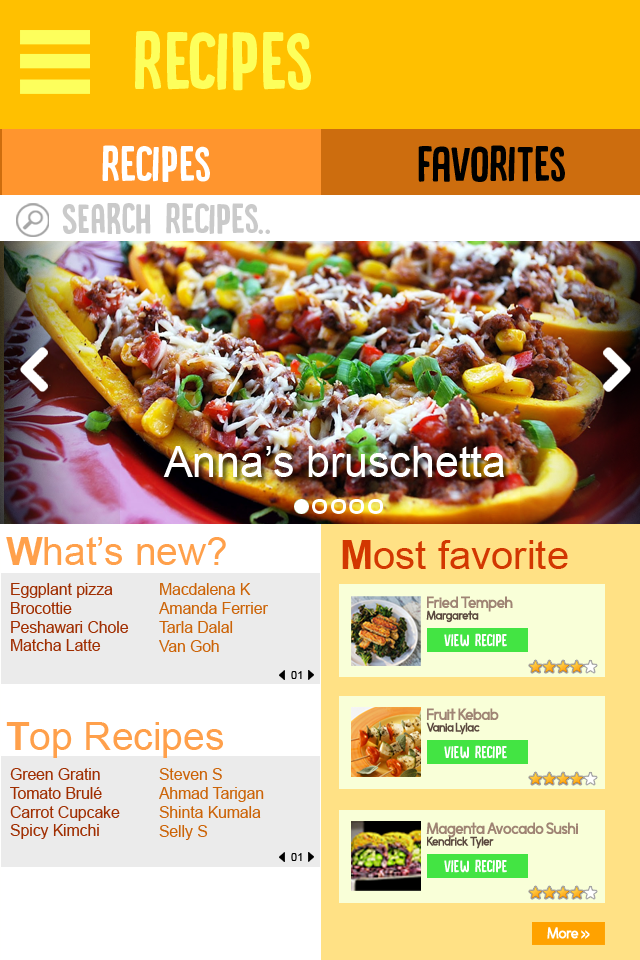
<style>
.page{position:relative;width:640px;height:960px}
.page>*{position:absolute;margin:0}
.t1{font:86.6px "DKCanoodle-Regular";color:#fdff5c}
.t2{font:52.6px "DKCanoodle-Regular";color:#ffffff}
.t3{font:52.6px "DKCanoodle-Regular";color:#000000}
.t4{font:44.7px "DKCanoodle-Regular";color:#cacaca}
.t5{font:42.9px "ArialMT";color:#ffffff}
.t6{font:15.7px "ArialMT";color:#a02e01}
.t7{font:38.9px "Arial-BoldMT";color:#ffa04b}
.t8{font:38.9px "ArialMT";color:#ffa04b}
.t9{font:15.7px/30.1px "ArialMT";color:#a02e01}
.t10{font:40px "ArialMT";color:#d23701}
.t11{font:40px "Arial-BoldMT";color:#d23701}
.t12{font:15.7px "ArialMT";color:#cc6408}
.t13{font:15.7px/30.1px "ArialMT";color:#cc6408}
.t14{font:17.4px "Morningtype-Bold";color:#9f8474}
.t15{font:13.2px "Morningtype-Bold";color:#5b493f}
.t16{font:18.3px "DKCanoodle-Regular";color:#ffffff}
.t17{font:11px "ArialMT";color:#000000}
.t18{font:16.6px "Morningtype-Bold";color:#ffffff}
.t19{font:16.6px "Morningtype-Bold";color:#ffffff;scale:0.7 1}
</style>
<div class="page">
<p class="t1" style="left:135px;top:31px;width:176px;height:60px">recipes</p>
<p class="t2" style="left:102px;top:145px;width:108px;height:37px">recipes</p>
<p class="t3" style="left:418px;top:145px;width:147px;height:37px">favorites</p>
<p class="t4" style="left:62px;top:203px;width:208px;height:31px">SEARCH recipes..</p>
<p class="t5" style="left:163px;top:446px;width:341px;height:31px">Anna’s bruschetta</p>
<p class="t6" style="left:6px;top:537px;width:220px;height:114px"><span class="t7">W</span><span class="t8">hat’s new?<br></span><span class="t9"> Eggplant pizza<br></span> Brocottie<br> Peshawari Chole<br> Matcha Latte</p>
<p class="t10" style="left:342px;top:540px;width:226px;height:29px"><span class="t11">M</span>ost favorite</p>
<p class="t12" style="left:159px;top:583px;width:109px;height:69px"><span class="t13">Macdalena K</span><br>Amanda Ferrier<br>Tarla Dalal<br>Van Goh</p>
<p class="t14" style="left:427px;top:596px;width:86px;height:16px">Fried Tempeh</p>
<p class="t15" style="left:426px;top:610px;width:53px;height:13px">Margareta</p>
<p class="t16" style="left:444px;top:633px;width:63px;height:14px">view recipe</p>
<p class="t17" style="left:291px;top:671px;width:11px;height:8px">01</p>
<p class="t14" style="left:427px;top:708px;width:72px;height:12px">Fruit Kebab</p>
<p class="t6" style="left:6px;top:722px;width:217px;height:117px"><span class="t7">T</span><span class="t8">op Recipes<br></span><span class="t9"> Green Gratin</span><br> Tomato Brulé<br> Carrot Cupcake<br> Spicy Kimchi</p>
<p class="t15" style="left:426px;top:722px;width:54px;height:13px">Vania Lylac</p>
<p class="t16" style="left:444px;top:745px;width:63px;height:14px">view recipe</p>
<p class="t12" style="left:159px;top:768px;width:105px;height:72px"><span class="t13">Steven S<br></span>Ahmad Tarigan<br>Shinta Kumala<br>Selly S</p>
<p class="t14" style="left:426px;top:822px;width:152px;height:16px">Magenta Avocado Sushi</p>
<p class="t15" style="left:427px;top:836px;width:67px;height:13px">Kendrick Tyler</p>
<p class="t17" style="left:291px;top:853px;width:11px;height:8px">01</p>
<p class="t16" style="left:444px;top:859px;width:63px;height:14px">view recipe</p>
<p class="t18" style="left:547px;top:927px;width:43px;height:12px">More <span class="t19">&gt;&gt;</span></p>
</div>
